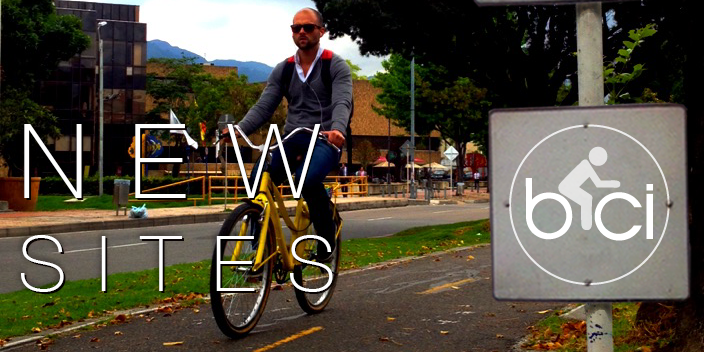
<style>
.page{position:relative;width:704px;height:352px}
.page>*{position:absolute;margin:0}
.t1{font:77.2px "HelveticaNeue-Thin";letter-spacing:0.4em;color:#fefefe}
.t2{font:103px "HelveticaNeue-Thin";letter-spacing:0.4em;color:#fefefe}
.t3{font:77.2px "HelveticaNeue-Thin";letter-spacing:0.4em}
.t4{font:103px "HelveticaNeue-Thin";letter-spacing:0.4em}
</style>
<div class="page">
<p class="t1" style="left:21px;top:124px;width:312px;height:168px"><span class="t2">NEW<br></span>SITES</p>
<p class="t3" style="left:23px;top:126px;width:311px;height:168px"><span class="t4">NEW<br></span>SITES</p>
</div>
